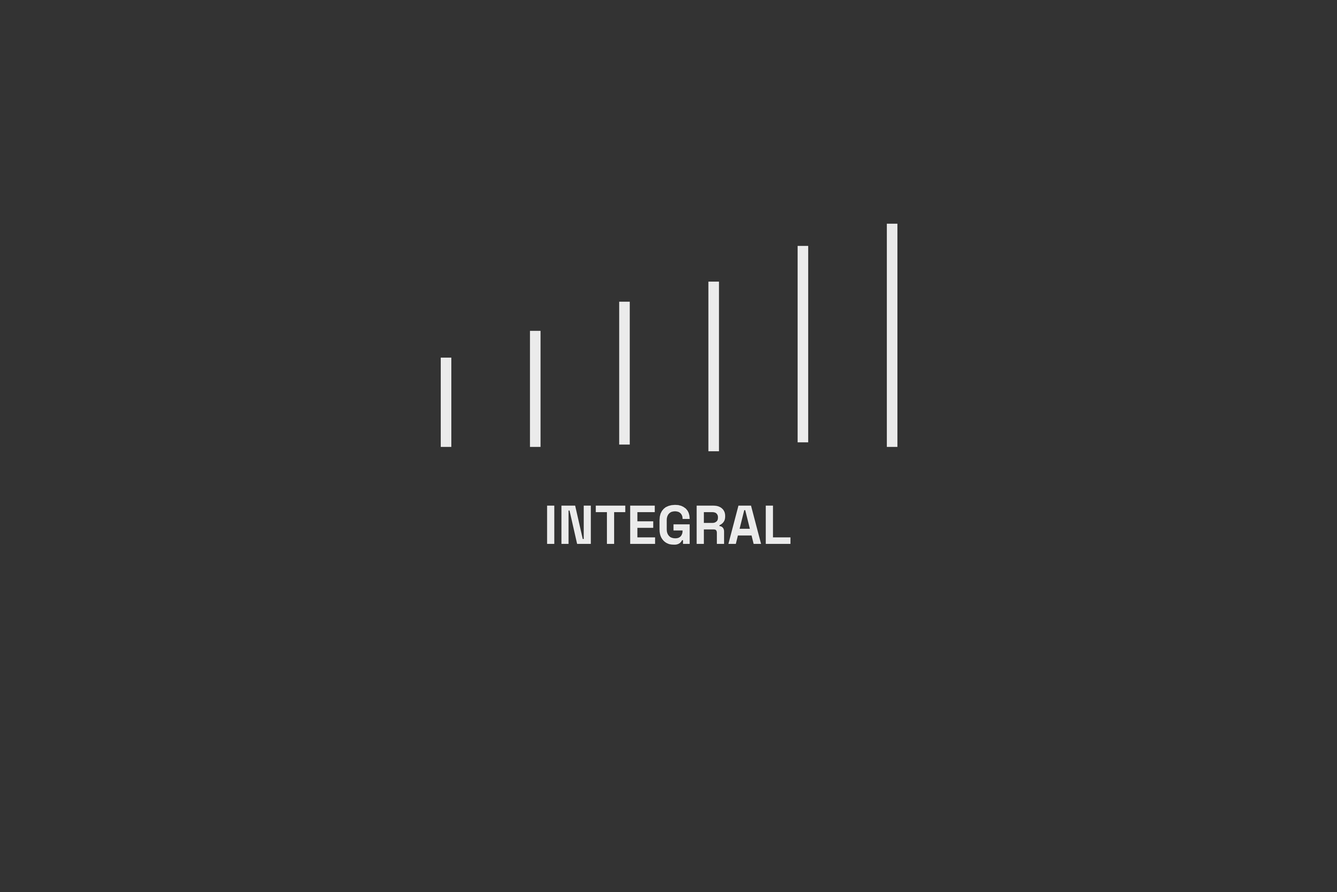
<style>
.page{position:relative;width:1337px;height:892px;background:#333333}
.page>*{position:absolute;margin:0}
.t1{font:54.7px "SpaceGroteskLight-Bold";color:#ebebeb}
</style>
<div class="page">
<p class="t1" style="left:547px;top:504px;width:244px;height:41px">INTEGRAL</p>
</div>
